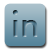
<style>
.page{position:relative;width:50px;height:50px;background:#ffffff}
.page>*{position:absolute;margin:0}
.t1{font:36px "Futura-Medium"}
</style>
<div class="page">
<p class="t1" style="left:12px;top:10px;width:26px;height:27px">in</p>
</div>
